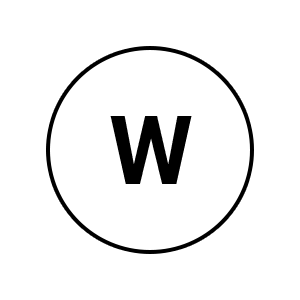
<style>
.page{position:relative;width:300px;height:300px;background:#ffffff}
.page>*{position:absolute;margin:0}
.t1{font:96px "Roboto-Bold";color:#000000}
</style>
<div class="page">
<p class="t1" style="left:110px;top:116px;width:82px;height:68px">W</p>
</div>
